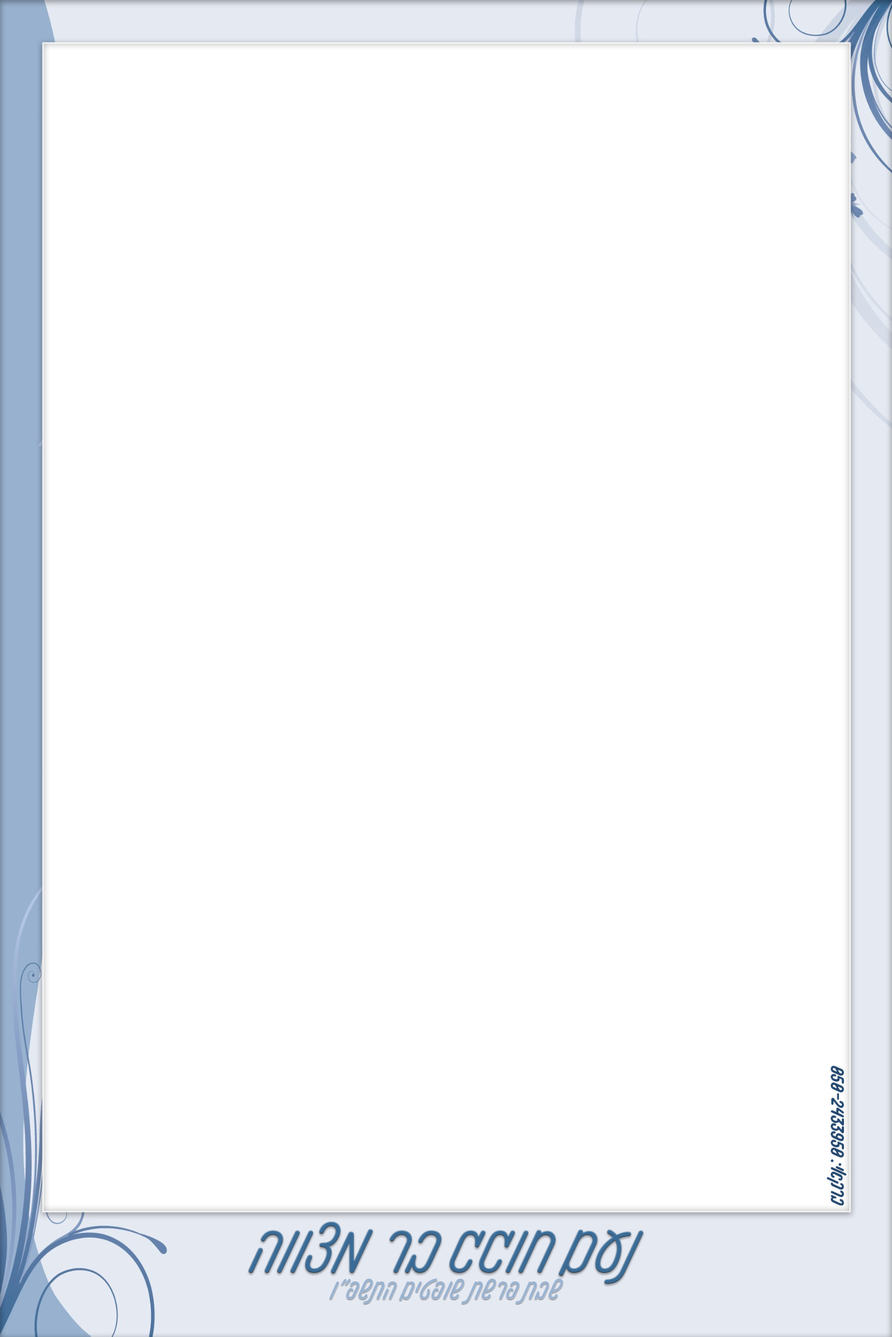
<style>
.page{position:relative;width:892px;height:1337px;background:#ffffff}
.page>*{position:absolute;margin:0}
.t1{font:20.9px "Flamingov2FM-Bold";color:#22476e}
.t2{font:69.7px "Flamingov2FM-Regular";color:#3a6b96}
.t3{font:27.9px "Flamingov2FM-Medium";letter-spacing:0.025em;color:#98b1cf}
</style>
<div class="page">
<p class="t1" style="left:826px;top:1066px;width:20px;height:140px;rotate:90deg">ברקאי: 050-2433950</p>
<p class="t2" style="left:248px;top:1221px;width:396px;height:63px">נעם חוגג בר מצווה</p>
<p class="t3" style="left:329px;top:1278px;width:234px;height:26px">שבת פרשת שופטים התשפ״ו</p>
</div>
